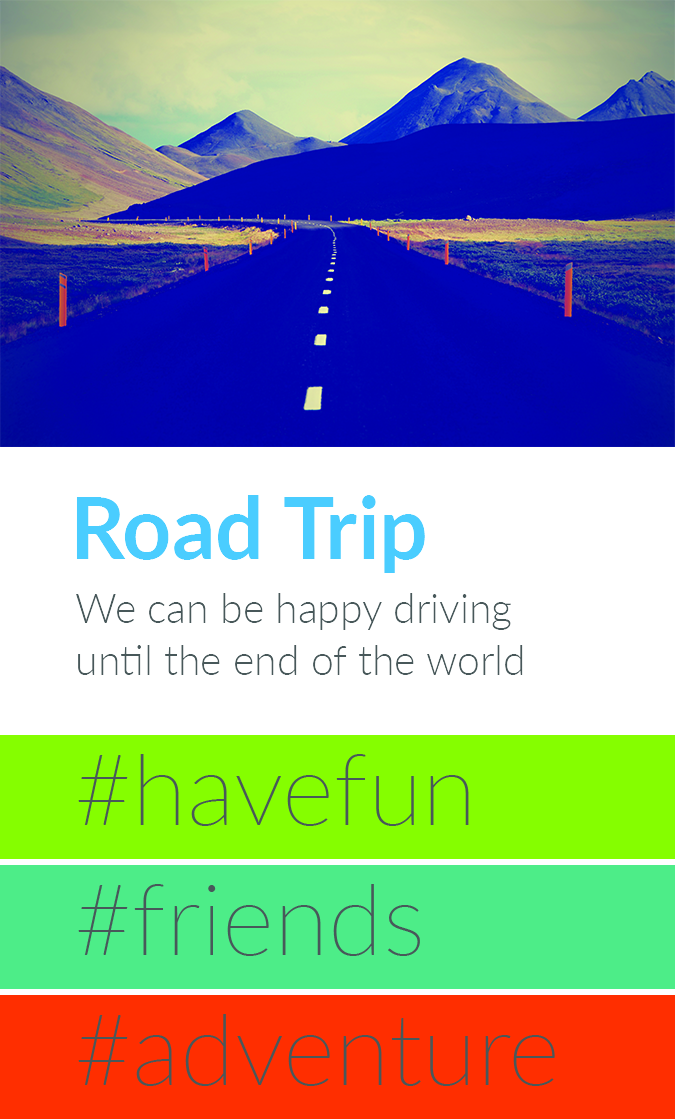
<style>
.page{position:relative;width:675px;height:1119px;background:#ffffff}
.page>*{position:absolute;margin:0}
.t1{font:86px "Lato-Bold";color:#4acdff}
.t2{font:41px/52px "Lato-Light";color:#48585a}
</style>
<div class="page">
<p class="t1" style="left:76px;top:495px;width:349px;height:78px">Road Trip</p>
<p class="t2" style="left:76px;top:593px;width:447px;height:82px;text-align:right">We can be happy driving until the end of the world</p>
</div>
